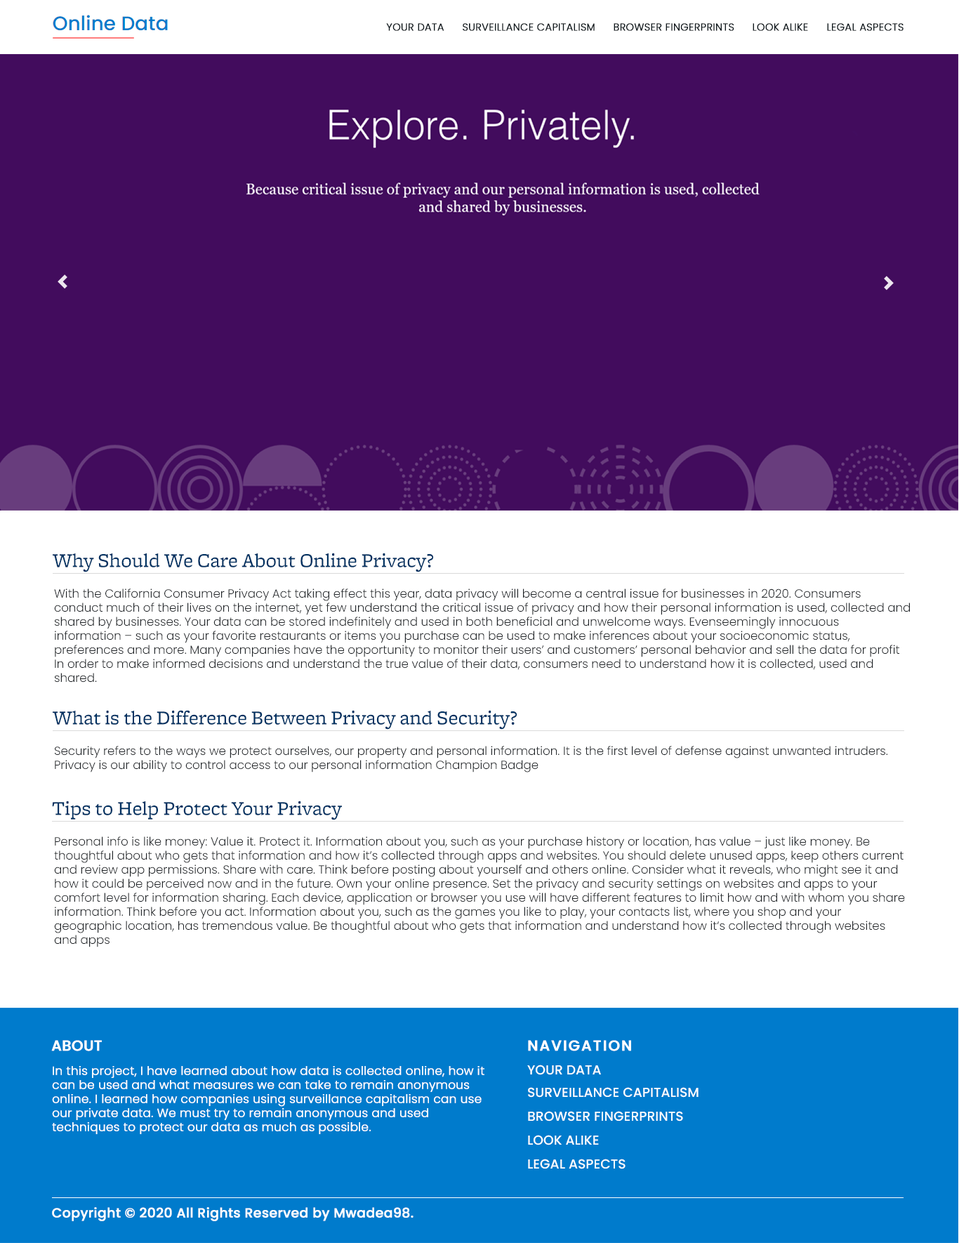
<style>
.page{position:relative;width:959px;height:1243px;background:#ffffff}
.page>*{position:absolute;margin:0}
.t1{font:10.2px "Poppins-Light";color:#0f181d;font-weight:bold}
.t2{font:20.5px "Freight-MicroBook";color:#003262}
.t3{font:11.7px "Poppins-Light";color:#212529}
.t4{font:14.6px "Poppins-Medium";color:#ffffff;font-weight:bold}
.t5{font:14.6px "Poppins-Medium";letter-spacing:0.08em;color:#ffffff;font-weight:bold}
.t6{font:11.7px "Poppins-Light";color:#ffffff;font-weight:bold}
.t7{font:13.2px "Poppins-Medium";color:#ffffff}
.t8{font:13.2px "Poppins-Medium";color:#ffffff;font-weight:bold}
</style>
<div class="page">
<p class="t1" style="left:386px;top:23px;width:59px;height:8px">YOUR DATA</p>
<p class="t1" style="left:463px;top:23px;width:132px;height:8px">SURVEILLANCE CAPITALISM</p>
<p class="t1" style="left:614px;top:23px;width:121px;height:8px">BROWSER FINGERPRINTS</p>
<p class="t1" style="left:753px;top:23px;width:55px;height:8px">LOOK ALIKE</p>
<p class="t1" style="left:827px;top:23px;width:77px;height:8px">LEGAL ASPECTS</p>
<p class="t2" style="left:53px;top:553px;width:381px;height:19px">Why Should We Care About Online Privacy?</p>
<p class="t3" style="left:54px;top:589px;width:856px;height:94px">With the California Consumer Privacy Act taking effect this year, data privacy will become a central issue for businesses in 2020. Consumers<br>conduct much of their lives on the internet, yet few understand the critical issue of privacy and how their personal information is used, collected and<br>shared by businesses. Your data can be stored indefinitely and used in both beneficial and unwelcome ways. Evenseemingly innocuous <br>information – such as your favorite restaurants or items you purchase can be used to make inferences about your socioeconomic status, <br>preferences and more. Many companies have the opportunity to monitor their users’ and customers’ personal behavior and sell the data for profit<br>In order to make informed decisions and understand the true value of their data, consumers need to understand how it is collected, used and<br>shared.</p>
<p class="t2" style="left:53px;top:710px;width:465px;height:20px">What is the Difference Between Privacy and Security?</p>
<p class="t3" style="left:55px;top:746px;width:833px;height:26px">Security refers to the ways we protect ourselves, our property and personal information. It is the first level of defense against unwanted intruders. <br>Privacy is our ability to control access to our personal information Champion Badge</p>
<p class="t2" style="left:52px;top:801px;width:290px;height:19px">Tips to Help Protect Your Privacy</p>
<p class="t3" style="left:54px;top:836px;width:851px;height:111px">Personal info is like money: Value it. Protect it. Information about you, such as your purchase history or location, has value – just like money. Be <br>thoughtful about who gets that information and how it’s collected through apps and websites. You should delete unused apps, keep others current <br>and review app permissions. Share with care. Think before posting about yourself and others online. Consider what it reveals, who might see it and <br>how it could be perceived now and in the future. Own your online presence. Set the privacy and security settings on websites and apps to your <br>comfort level for information sharing. Each device, application or browser you use will have different features to limit how and with whom you share <br>information. Think before you act. Information about you, such as the games you like to play, your contacts list, where you shop and your <br>geographic location, has tremendous value. Be thoughtful about who gets that information and understand how it’s collected through websites <br>and apps</p>
<p class="t4" style="left:51px;top:1040px;width:51px;height:11px">ABOUT</p>
<p class="t5" style="left:528px;top:1040px;width:103px;height:11px">NAVIGATION</p>
<p class="t6" style="left:52px;top:1066px;width:433px;height:68px">In this project, I have learned about how data is collected online, how it <br>can be used and what measures we can take to remain anonymous<br>online. I learned how companies using surveillance capitalism can use <br>our private data. We must try to remain anonymous and used <br>techniques to protect our data as much as possible.</p>
<p class="t7" style="left:527px;top:1065px;width:74px;height:10px">YOUR DATA</p>
<p class="t7" style="left:528px;top:1087px;width:171px;height:11px">SURVEILLANCE CAPITALISM</p>
<p class="t7" style="left:528px;top:1111px;width:155px;height:11px">BROWSER FINGERPRINTS</p>
<p class="t7" style="left:528px;top:1135px;width:71px;height:10px">LOOK ALIKE</p>
<p class="t7" style="left:528px;top:1159px;width:98px;height:10px">LEGAL ASPECTS</p>
<p class="t8" style="left:52px;top:1207px;width:362px;height:14px">Copyright © 2020 All Rights Reserved by Mwadea98.</p>
</div>
